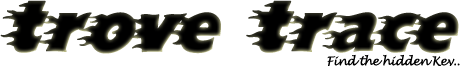
<style>
.page{position:relative;width:469px;height:66px;background:#ffffff}
.page>*{position:absolute;margin:0}
.t1{font:72px "Blazed";letter-spacing:-0.05em;color:#000000}
</style>
<div class="page">
<p class="t1" style="left:0px;top:0px;width:459px;height:54px">trove trace</p>
</div>
